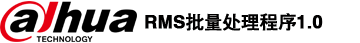
<style>
.page{position:relative;width:360px;height:43px;background:#ffffff}
.page>*{position:absolute;margin:0}
.t1{font:18px "CTCuHeiSJ";color:#010000;font-weight:bold}
</style>
<div class="page">
<p class="t1" style="left:145px;top:13px;width:178px;height:18px">RMS批量处理程序1.0</p>
</div>
